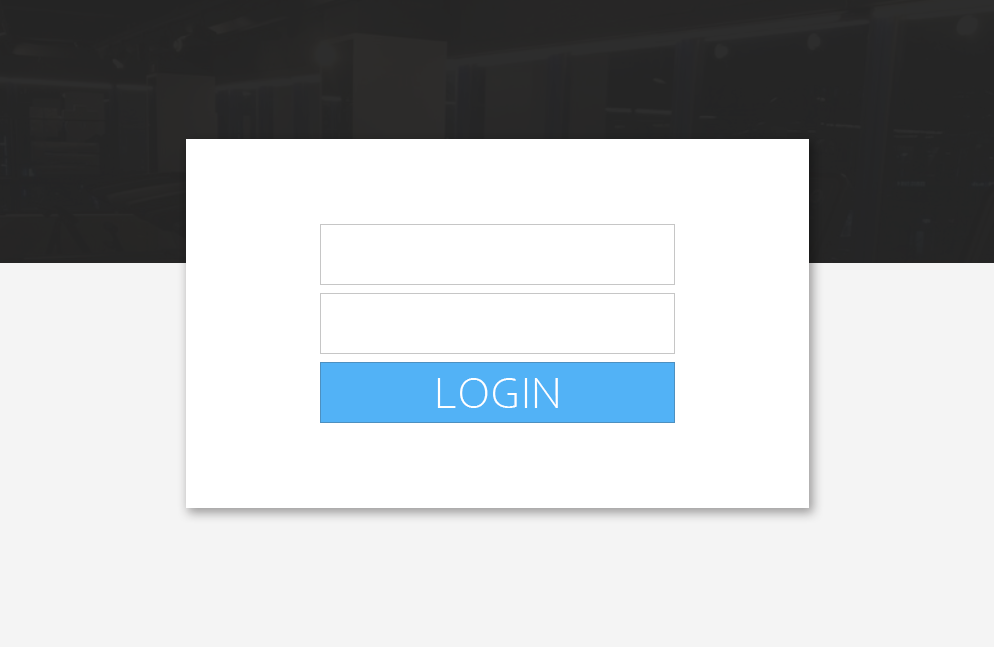
<style>
.page{position:relative;width:994px;height:647px;background:#f4f4f4}
.page>*{position:absolute;margin:0}
.t1{font:45.8px "CorbelLight";color:#ffffff}
</style>
<div class="page">
<p class="t1" style="left:437px;top:378px;width:121px;height:30px">LOGIN</p>
</div>
